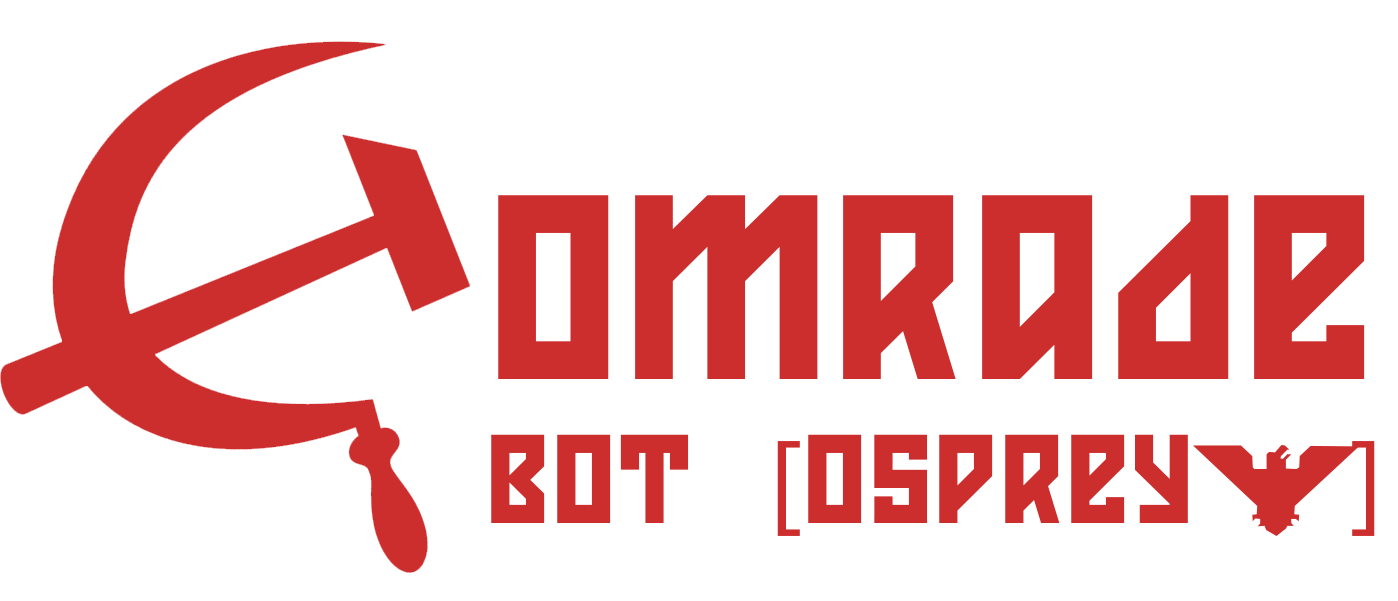
<style>
.page{position:relative;width:1398px;height:601px;background:#ffffff}
.page>*{position:absolute;margin:0}
.t1{font:250px "KonstruktorRegular";color:#cc2e2d}
.t2{font:120px "KonstruktorRegular";color:#cc2e2d}
.t3{font:120px "MyriadPro-Regular";color:#cc2e2d}
</style>
<div class="page">
<p class="t1" style="left:491px;top:195px;width:884px;height:341px">omrade<br><span class="t2">BOT   </span><span class="t3">[</span><span class="t2">Osprey     </span><span class="t3">]</span></p>
</div>
